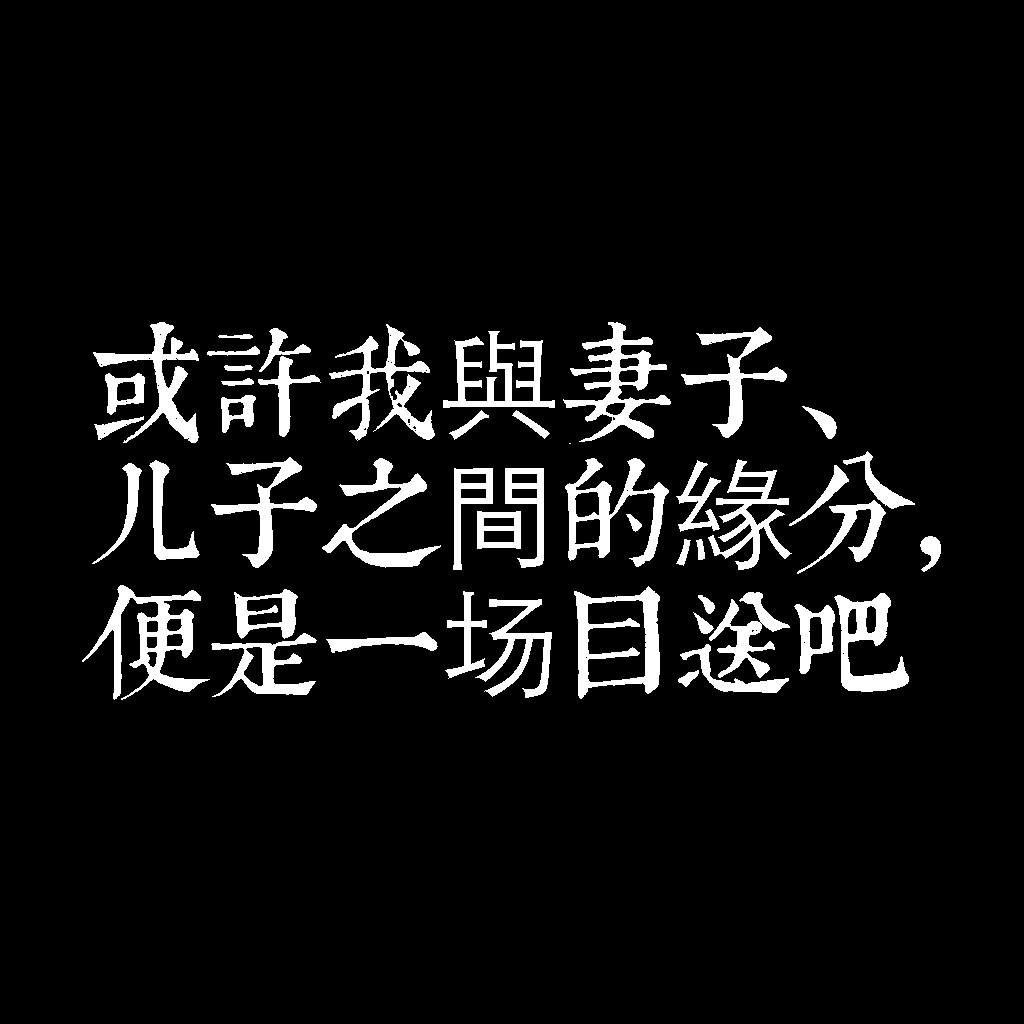
<style>
.page{position:relative;width:1024px;height:1024px;background:#000000}
.page>*{position:absolute;margin:0}
.t1{font:120px/130px "TpldKhangXiDictTrial";letter-spacing:-0.02em;color:#ffffff}
.t2{font:120px/130px "STHeitiTC-Light";letter-spacing:-0.02em;color:#ffffff}
</style>
<div class="page">
<p class="t1" style="left:82px;top:322px;width:859px;height:378px">或許我<span class="t2">與</span>妻子、<br>儿子之<span class="t2">間</span>的<span class="t2">緣</span>分，<br>便是一<span class="t2">场</span>目送吧</p>
</div>
